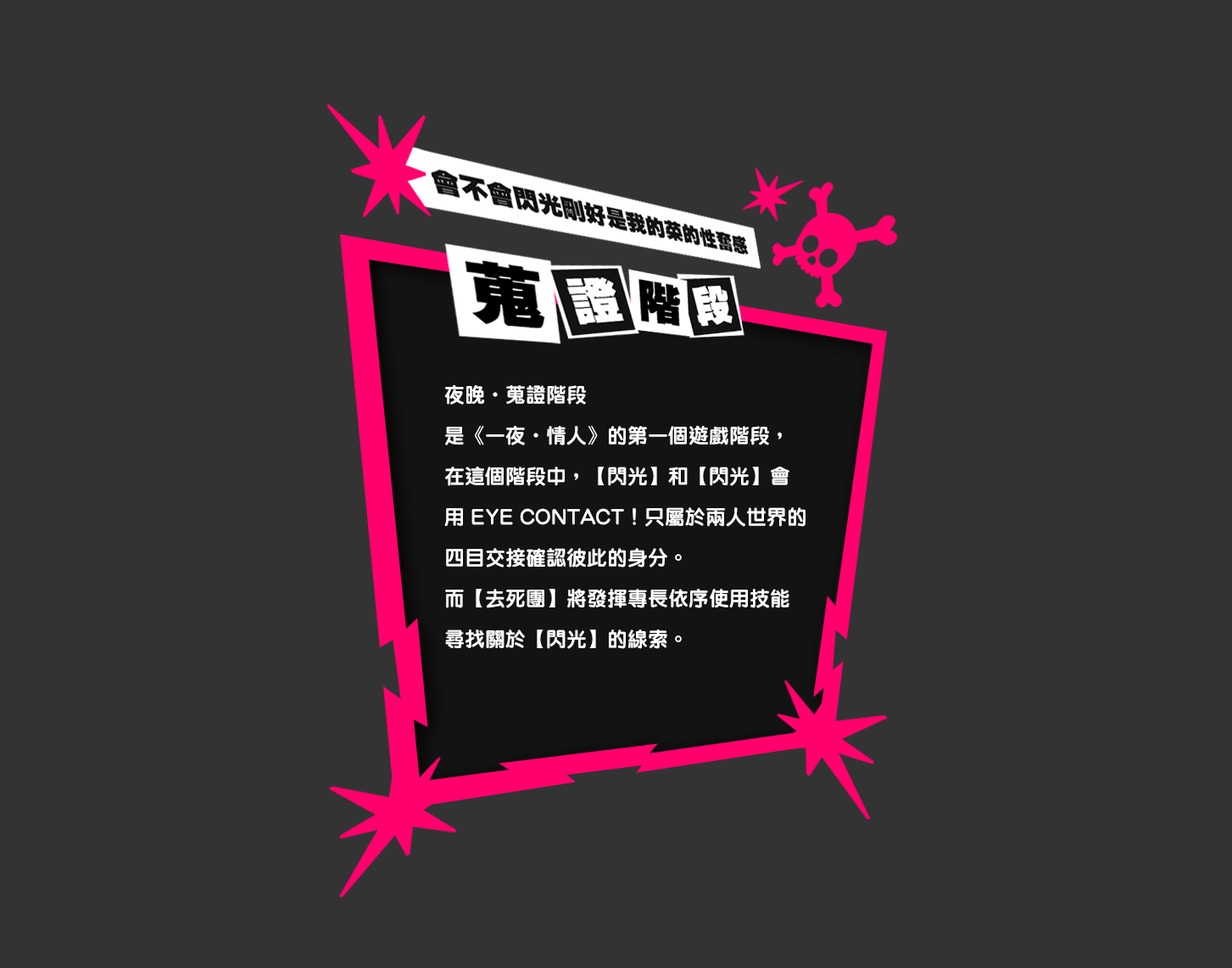
<style>
.page{position:relative;width:1232px;height:968px;background:#333333}
.page>*{position:absolute;margin:0}
.t1{font:20.4px/40.7px "MYuenHK-Xbold";color:#ffffff}
</style>
<div class="page">
<p class="t1" style="left:444px;top:385px;width:362px;height:264px">夜晚．蒐證階段<br>是《一夜．情人》的第一個遊戲階段，在這個階段中，【閃光】和【閃光】會用 EYE CONTACT！只屬於兩人世界的四目交接確認彼此的身分。<br>而【去死團】將發揮專長依序使用技能尋找關於【閃光】的線索。</p>
</div>
